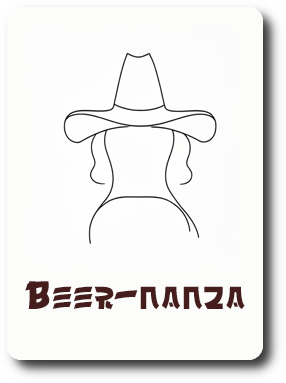
<style>
.page{position:relative;width:286px;height:383px;background:#fcfcfb}
.page>*{position:absolute;margin:0}
.t1{font:30px "ChinyenNormal";color:#461d1d}
</style>
<div class="page">
<p class="t1" style="left:25px;top:281px;width:220px;height:28px">Beer-nanza</p>
</div>
